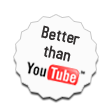
<style>
.page{position:relative;width:110px;height:110px;background:#ffffff}
.page>*{position:absolute;margin:0}
.t1{font:18px/18px "AccidentalPresidency";letter-spacing:0.01em;color:#322f2f;scale:1.05 1}
</style>
<div class="page">
<p class="t1" style="left:41px;top:25px;width:39px;height:37px;text-align:center;rotate:12deg">Better<br>than</p>
</div>
